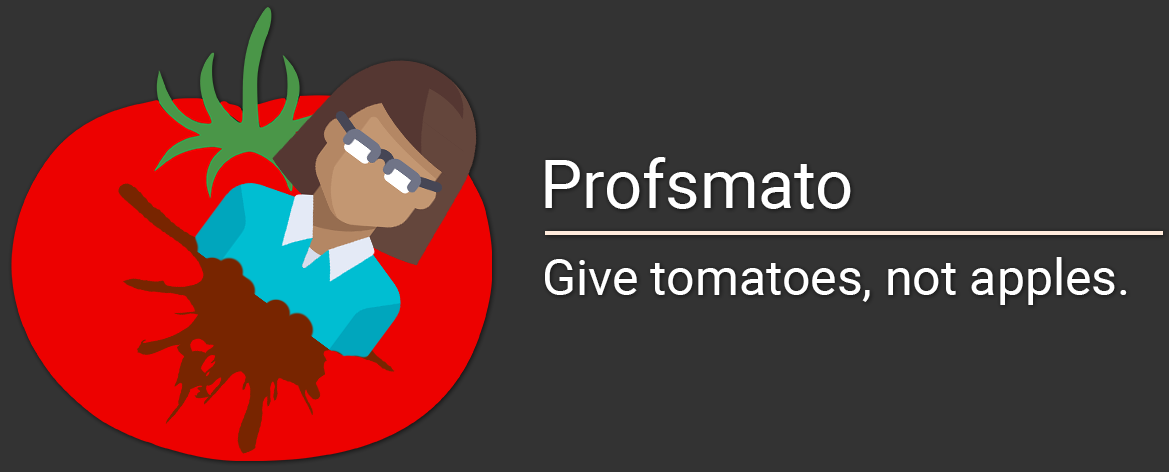
<style>
.page{position:relative;width:1169px;height:472px;background:#333333}
.page>*{position:absolute;margin:0}
.t1{font:66.7px "Roboto-Regular";color:#ffffff}
.t2{font:50px "Roboto-Regular";color:#ffffff}
</style>
<div class="page">
<p class="t1" style="left:545px;top:157px;width:306px;height:52px">Profsmato</p>
<p class="t2" style="left:545px;top:257px;width:582px;height:48px">Give tomatoes, not apples.</p>
</div>
